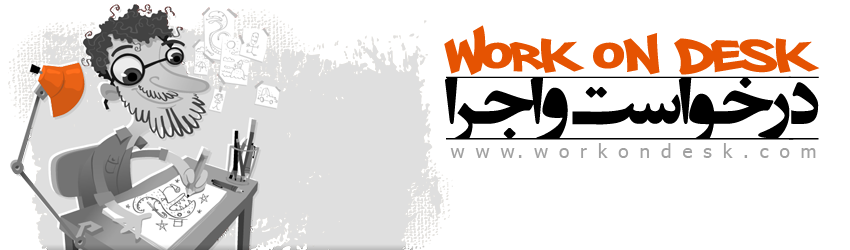
<style>
.page{position:relative;width:850px;height:250px;background:#ffffff}
.page>*{position:absolute;margin:0}
.t1{font:63px "PhillySans";color:#e55302}
.t2{font:83.3px "EntezareZohoor2";letter-spacing:0.01em;color:#000000}
.t3{font:19px "Tahoma";letter-spacing:0.13em;color:#a1a1a1}
</style>
<div class="page">
<p class="t1" style="left:444px;top:25px;width:376px;height:50px">Work on Desk</p>
<p class="t2" style="left:445px;top:76px;width:374px;height:64px">درخواست و  اجرا</p>
<p class="t3" style="left:450px;top:143px;width:366px;height:15px">w w w. w o r k o n d e s k . c o m</p>
</div>
